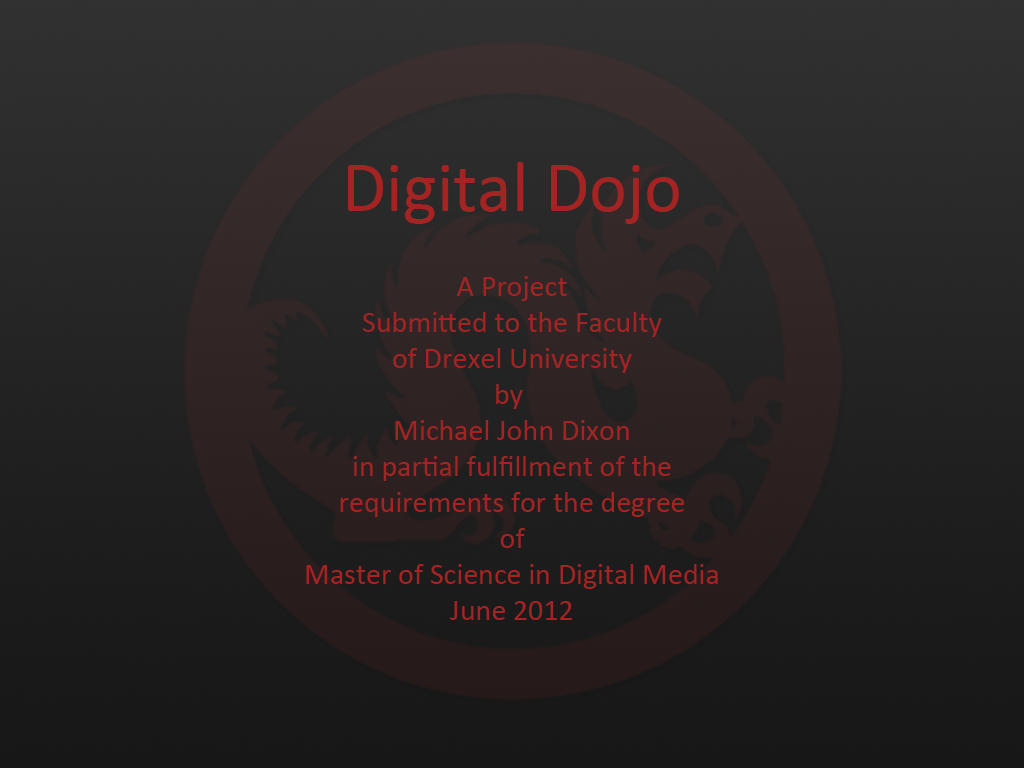
<style>
.page{position:relative;width:1024px;height:768px}
.page>*{position:absolute;margin:0}
.t1{font:72px "Calibri";color:#a42323}
.t2{font:30px "Calibri";color:#a42323}
</style>
<div class="page">
<p class="t1" style="left:348px;top:162px;width:331px;height:62px">Digital Dojo</p>
<p class="t2" style="left:306px;top:276px;width:412px;height:344px;text-align:center">A Project<br>Submitted to the Faculty<br>of Drexel University<br>by <br>Michael John Dixon<br>in partial fulfillment of the<br>requirements for the degree<br>of<br>Master of Science in Digital Media<br>June 2012</p>
</div>
